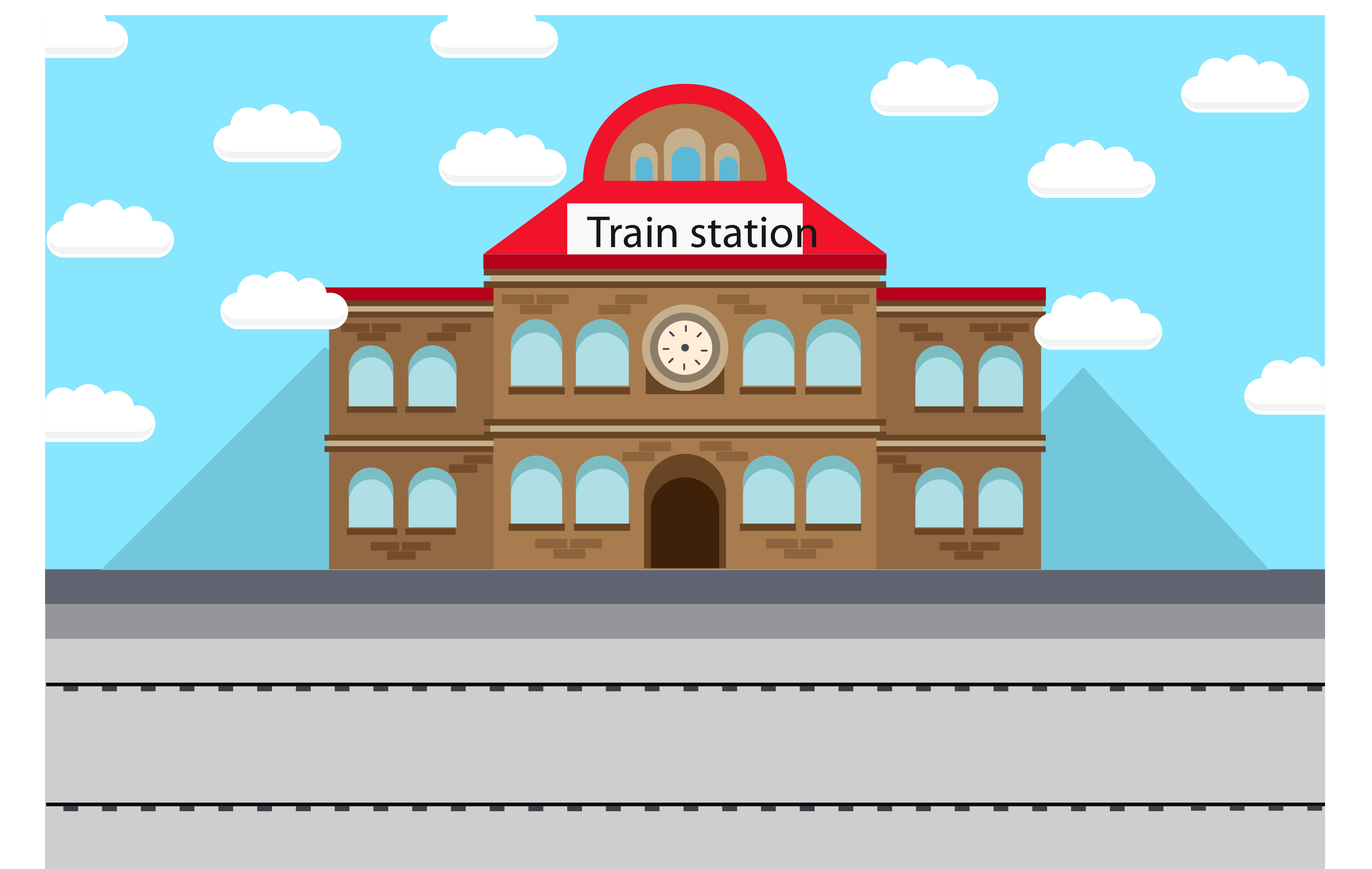
<style>
.page{position:relative;width:1372px;height:869px;background:#88e6ff}
.page>*{position:absolute;margin:0}
.t1{font:45.2px "BebasNeueRegular";color:#171719}
</style>
<div class="page">
<p class="t1" style="left:587px;top:216px;width:229px;height:32px">Train station</p>
</div>
